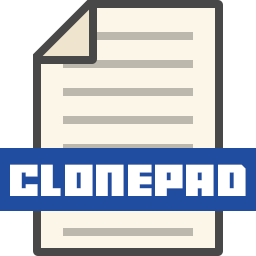
<style>
.page{position:relative;width:256px;height:256px;background:#fcf6e8}
.page>*{position:absolute;margin:0}
.t1{font:41.2px "Bankjob";color:#ffffff}
</style>
<div class="page">
<p class="t1" style="left:10px;top:164px;width:236px;height:32px">Clonepad</p>
</div>
